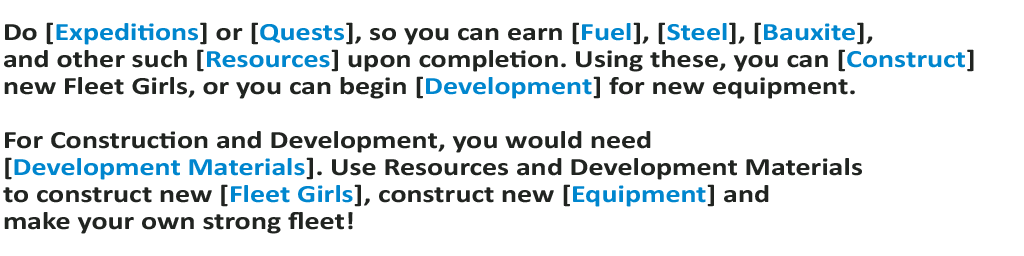
<style>
.page{position:relative;width:1024px;height:256px;background:#ffffff}
.page>*{position:absolute;margin:0}
.t1{font:25px/27px "Calibri-Bold";color:#212421;scale:1.2 1}
.t2{font:25px/27px "Calibri-Bold";color:#0086ce;scale:1.2 1}
</style>
<div class="page">
<p class="t1" style="left:3px;top:22px;width:971px;height:212px">Do [<span class="t2">Expeditions</span>] or [<span class="t2">Quests</span>], so you can earn [<span class="t2">Fuel</span>], [<span class="t2">Steel</span>], [<span class="t2">Bauxite</span>], <br>and other such [<span class="t2">Resources</span>] upon completion. Using these, you can [<span class="t2">Construct</span>] <br>new Fleet Girls, or you can begin [<span class="t2">Development</span>] for new equipment.<br><br>For Construction and Development, you would need <br>[<span class="t2">Development Materials</span>]. Use Resources and Development Materials <br>to construct new [<span class="t2">Fleet Girls</span>], construct new [<span class="t2">Equipment</span>] and <br>make your own strong fleet!</p>
</div>
